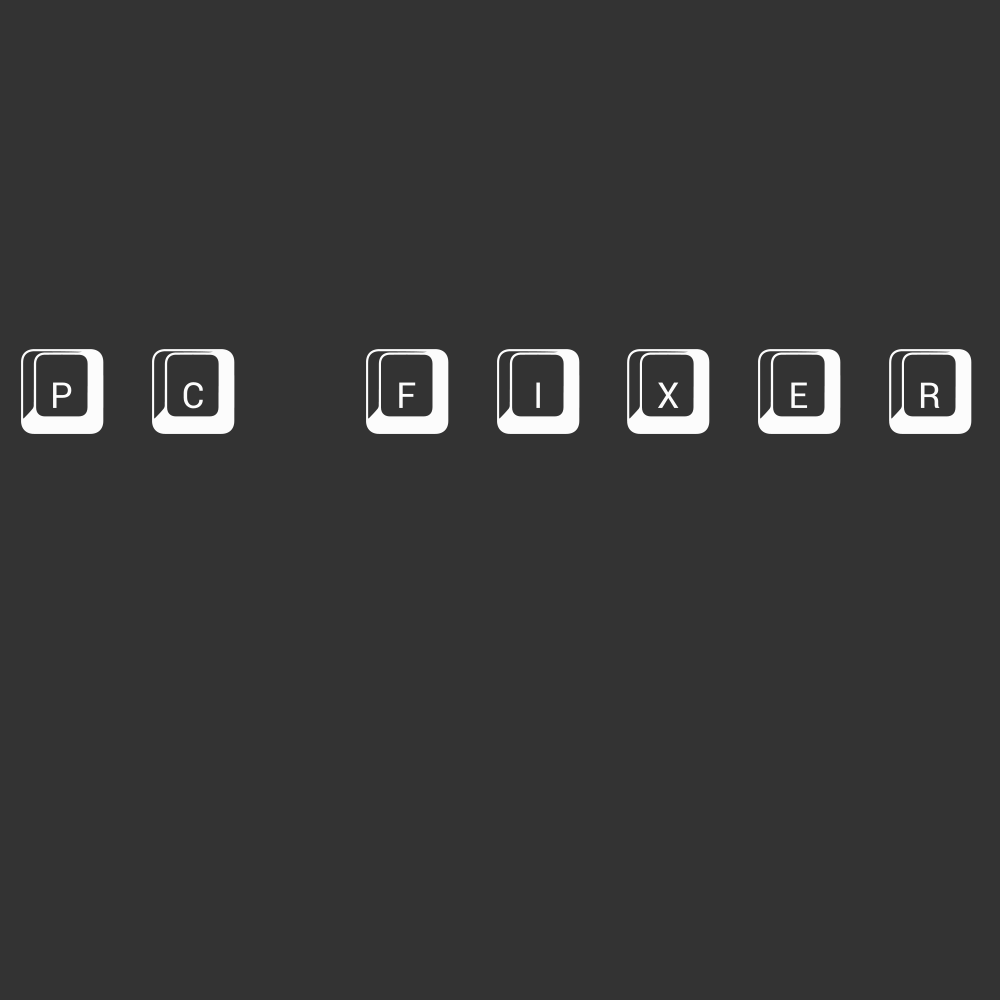
<style>
.page{position:relative;width:1000px;height:1000px;background:#333333}
.page>*{position:absolute;margin:0}
.t1{font:121.2px "212Keyboard";letter-spacing:0.3em;color:#fcfcfc;text-transform:uppercase}
</style>
<div class="page">
<p class="t1" style="left:21px;top:349px;width:951px;height:85px">PC FIXER</p>
</div>
